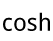
<style>
.page{position:relative;width:53px;height:41px;background:#ffffff}
.page>*{position:absolute;margin:0}
.t1{font:23.7px "DroidSans";color:#000000}
</style>
<div class="page">
<p class="t1" style="left:3px;top:12px;width:47px;height:19px">cosh</p>
</div>
